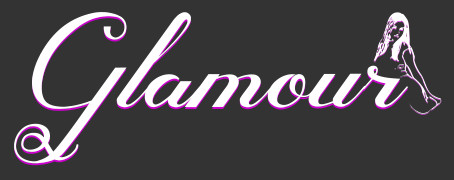
<style>
.page{position:relative;width:454px;height:180px;background:#333333}
.page>*{position:absolute;margin:0}
.t1{font:105.8px "GlamouryFree";color:#ffffff}
</style>
<div class="page">
<p class="t1" style="left:14px;top:14px;width:394px;height:152px">Glamour</p>
<p class="t1" style="left:14px;top:12px;width:394px;height:152px">Glamour</p>
</div>
